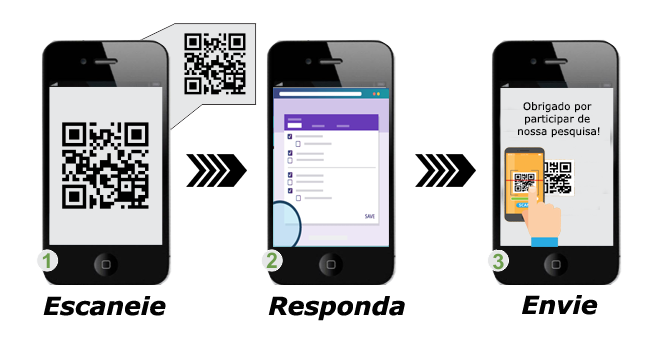
<style>
.page{position:relative;width:668px;height:360px;background:#ffffff}
.page>*{position:absolute;margin:0}
.t1{font:10.4px "Verdana";color:#020202}
.t2{font:25px "Verdana-BoldItalic";color:#020202}
</style>
<div class="page">
<p class="t1" style="left:518px;top:102px;width:82px;height:36px;text-align:center">Obrigado por <br>participar de <br>nossa pesquisa!</p>
<p class="t2" style="left:43px;top:296px;width:123px;height:20px">Escaneie</p>
<p class="t2" style="left:268px;top:296px;width:137px;height:25px">Responda</p>
<p class="t2" style="left:522px;top:295px;width:76px;height:20px">Envie</p>
</div>
